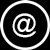
<style>
.page{position:relative;width:50px;height:50px;background:#000000}
.page>*{position:absolute;margin:0}
.t1{font:25.3px "ArialMT";letter-spacing:0.08em;color:#ffffff;text-transform:uppercase}
</style>
<div class="page">
<p class="t1" style="left:12px;top:13px;width:24px;height:25px">@</p>
</div>
